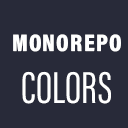
<style>
.page{position:relative;width:128px;height:128px;background:#282a39}
.page>*{position:absolute;margin:0}
.t1{font:24px "AcuminConcept-CondensedBlack";letter-spacing:0.05em;color:#ffffff}
.t2{font:46px "AcuminConcept-ExtraCondensed";color:#ffffff}
</style>
<div class="page">
<p class="t1" style="left:13px;top:34px;width:108px;height:18px">MONOREPO</p>
<p class="t2" style="left:22px;top:71px;width:89px;height:33px">COLORS</p>
</div>
